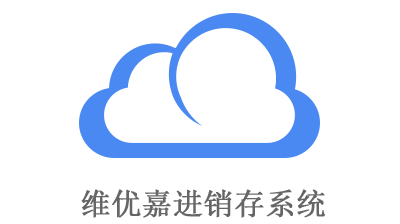
<style>
.page{position:relative;width:400px;height:224px;background:#ffffff}
.page>*{position:absolute;margin:0}
.t1{font:30px "SimSun";color:#666666;font-weight:bold}
</style>
<div class="page">
<p class="t1" style="left:81px;top:189px;width:244px;height:29px">维优嘉进销存系统</p>
</div>
